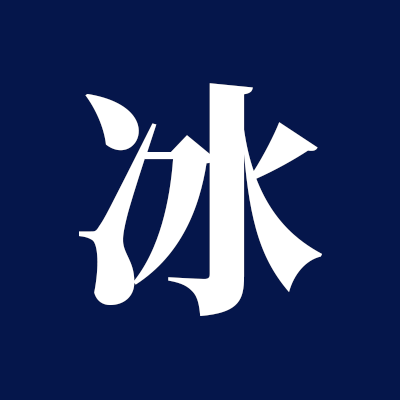
<style>
.page{position:relative;width:400px;height:400px;background:#05164b}
.page>*{position:absolute;margin:0}
.t1{font:250px "SourceHanSerifCN-Heavy";color:#ffffff}
</style>
<div class="page">
<p class="t1" style="left:79px;top:83px;width:243px;height:233px">冰</p>
</div>
